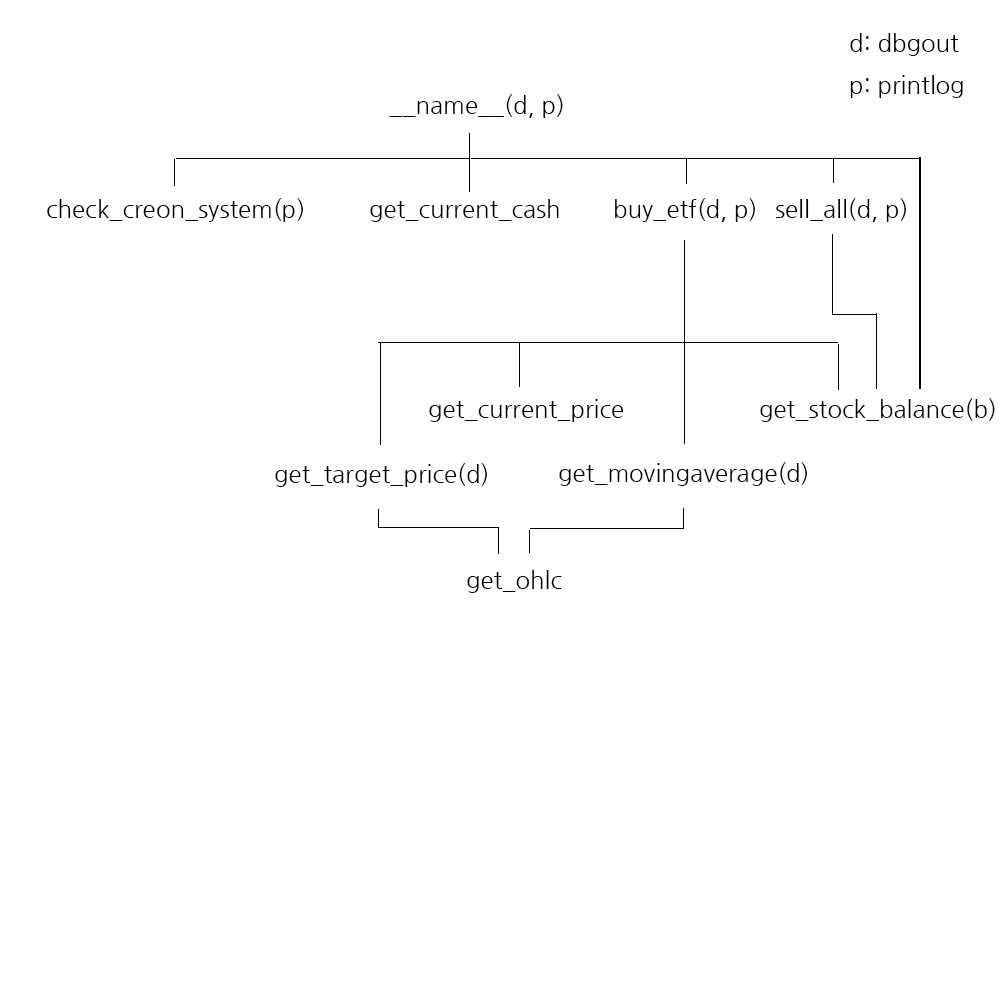
<style>
.page{position:relative;width:1000px;height:1000px;background:#ffffff}
.page>*{position:absolute;margin:0}
.t1{font:24px "NanumGothic";color:#000000}
</style>
<div class="page">
<p class="t1" style="left:850px;top:33px;width:109px;height:23px">d: dbgout</p>
<p class="t1" style="left:850px;top:75px;width:113px;height:23px">p: printlog</p>
<p class="t1" style="left:389px;top:94px;width:174px;height:24px">__name__(d, p)</p>
<p class="t1" style="left:47px;top:198px;width:256px;height:24px">check_creon_system(p)</p>
<p class="t1" style="left:615px;top:198px;width:140px;height:24px">buy_etf(d, p)</p>
<p class="t1" style="left:776px;top:198px;width:130px;height:24px">sell_all(d, p)</p>
<p class="t1" style="left:370px;top:199px;width:189px;height:23px">get_current_cash</p>
<p class="t1" style="left:429px;top:399px;width:195px;height:23px">get_current_price</p>
<p class="t1" style="left:760px;top:398px;width:235px;height:24px">get_stock_balance(b)</p>
<p class="t1" style="left:559px;top:462px;width:248px;height:24px">get_movingaverage(d)</p>
<p class="t1" style="left:275px;top:463px;width:212px;height:24px">get_target_price(d)</p>
<p class="t1" style="left:467px;top:570px;width:95px;height:23px">get_ohlc</p>
</div>
